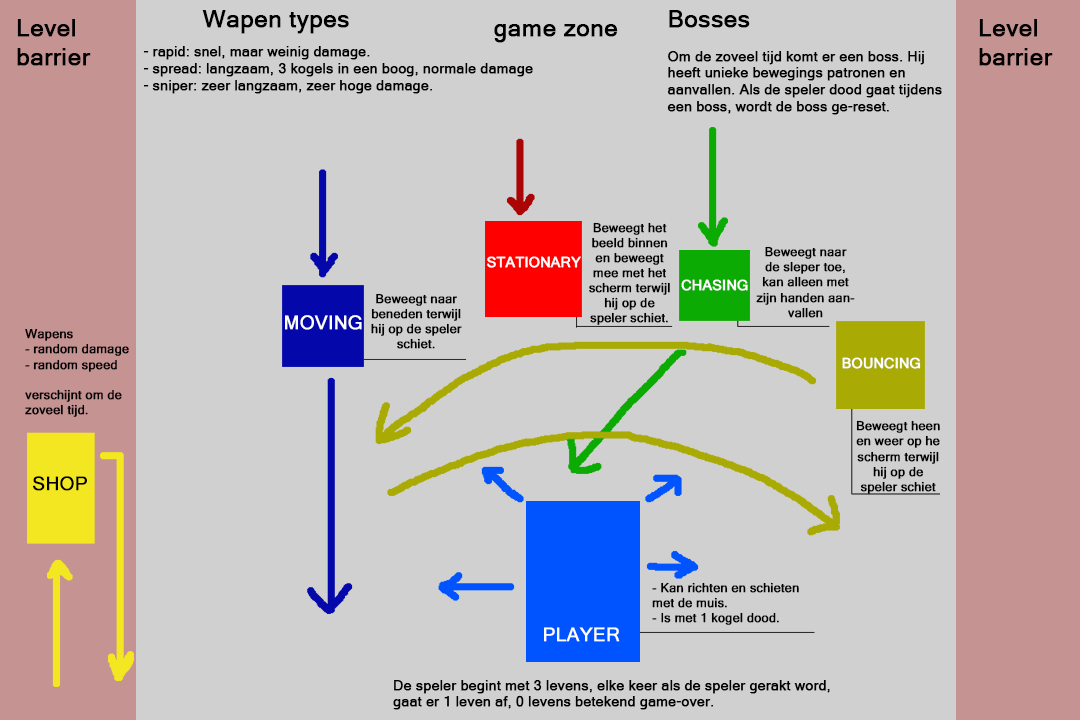
<style>
.page{position:relative;width:1080px;height:720px;background:#d0d0d0}
.page>*{position:absolute;margin:0}
.t1{font:24px "MicrosoftSansSerif";color:#000000;font-weight:bold}
.t2{font:14px "MicrosoftSansSerif";color:#000000;font-weight:bold}
.t3{font:12.6px "MicrosoftSansSerif";color:#000000;font-weight:bold}
.t4{font:14.2px "MicrosoftSansSerif";color:#ffffff;text-transform:uppercase;font-weight:bold}
.t5{font:18.9px "MicrosoftSansSerif";color:#ffffff;text-transform:uppercase;font-weight:bold}
.t6{font:18.9px "MicrosoftSansSerif";color:#000000;font-weight:bold}
</style>
<div class="page">
<p class="t1" style="left:202px;top:10px;width:147px;height:24px">Wapen types</p>
<p class="t2" style="left:667px;top:10px;width:275px;height:105px"><span class="t1">Bosses<br></span><br>Om de zoveel tijd komt er een boss. Hij heeft unieke bewegings patronen en <br>aanvallen. Als de speler dood gaat tijdens een boss, wordt de boss ge-reset.</p>
<p class="t1" style="left:17px;top:19px;width:74px;height:47px">Level<br>barrier</p>
<p class="t1" style="left:494px;top:24px;width:124px;height:19px">game zone</p>
<p class="t1" style="left:979px;top:19px;width:74px;height:47px">Level<br>barrier</p>
<p class="t2" style="left:143px;top:46px;width:390px;height:48px">- rapid: snel, maar weinig damage.<br>- spread: langzaam, 3 kogels in een boog, normale damage<br>- sniper: zeer langzaam, zeer hoge damage.</p>
<p class="t3" style="left:589px;top:222px;width:81px;height:103px;text-align:center">Beweegt het beeld binnen en beweegt mee met het scherm terwijl hij op de speler schiet.</p>
<p class="t3" style="left:756px;top:246px;width:99px;height:72px;text-align:center">Beweegt naar de sleper toe, kan alleen met zijn handen aanvallen</p>
<p class="t4" style="left:487px;top:256px;width:94px;height:12px">STATIONARY</p>
<p class="t4" style="left:681px;top:279px;width:67px;height:12px">CHASING</p>
<p class="t3" style="left:371px;top:293px;width:91px;height:56px;text-align:center">Beweegt naar beneden terwijl hij op de speler schiet.</p>
<p class="t5" style="left:285px;top:315px;width:77px;height:15px">MOVING</p>
<p class="t3" style="left:25px;top:328px;width:104px;height:89px">Wapens<br>- random damage<br>- random speed<br><br>verschijnt om de zoveel tijd.</p>
<p class="t4" style="left:842px;top:357px;width:79px;height:12px">BOUNCING</p>
<p class="t3" style="left:856px;top:420px;width:84px;height:74px;text-align:center">Beweegt heen en weer op he scherm terwijl hij op de speler schiet</p>
<p class="t6" style="left:33px;top:476px;width:54px;height:15px">SHOP</p>
<p class="t3" style="left:652px;top:582px;width:147px;height:43px">- Kan richten en schieten met de muis.<br>- Is met 1 kogel dood.</p>
<p class="t5" style="left:544px;top:627px;width:76px;height:15px">PLAYER</p>
<p class="t2" style="left:393px;top:680px;width:437px;height:30px">De speler begint met 3 levens, elke keer als de speler gerakt word, gaat er 1 leven af, 0 levens betekend game-over.</p>
</div>
